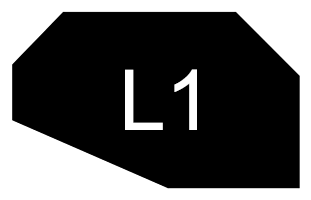
<style>
.page{position:relative;width:311px;height:200px;background:#000000}
.page>*{position:absolute;margin:0}
.t1{font:83.8px "ArialMT";color:#ffffff}
</style>
<div class="page">
<p class="t1" style="left:125px;top:69px;width:72px;height:61px">L1</p>
</div>
